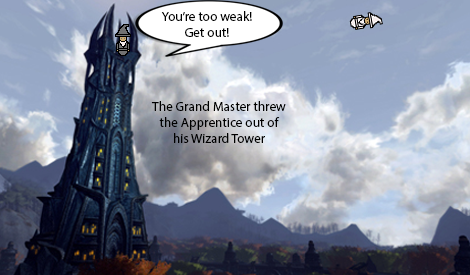
<style>
.page{position:relative;width:470px;height:275px}
.page>*{position:absolute;margin:0}
.t1{font:13.3px "MyriadPro-Regular";color:#000000}
</style>
<div class="page">
<p class="t1" style="left:161px;top:11px;width:91px;height:26px;text-align:center">You’re too weak!<br>Get out!</p>
<p class="t1" style="left:151px;top:101px;width:135px;height:42px;text-align:center">The Grand Master threw<br>the Apprentice out of<br>his Wizard Tower</p>
</div>
